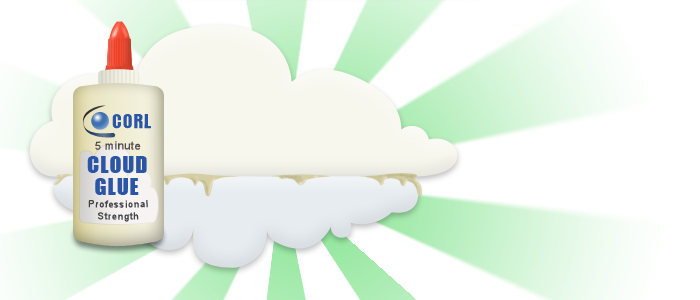
<style>
.page{position:relative;width:700px;height:300px;background:#ffffff}
.page>*{position:absolute;margin:0}
.t1{font:18px "Impact";letter-spacing:0.04em;color:#2b56a6}
.t2{font:11px "ArialMT";letter-spacing:0.04em;color:#504c4c}
.t3{font:22px "Impact";letter-spacing:0.04em;color:#2b56a6}
.t4{font:10px "ArialMT";letter-spacing:0.04em;color:#424447}
</style>
<div class="page">
<p class="t1" style="left:112px;top:114px;width:39px;height:15px">CORL</p>
<p class="t2" style="left:95px;top:141px;width:46px;height:9px">5 minute</p>
<p class="t3" style="left:87px;top:156px;width:60px;height:17px">CLOUD</p>
<p class="t3" style="left:95px;top:178px;width:44px;height:17px">GLUE</p>
<p class="t4" style="left:88px;top:200px;width:60px;height:22px;text-align:center">Professional Strength</p>
</div>
